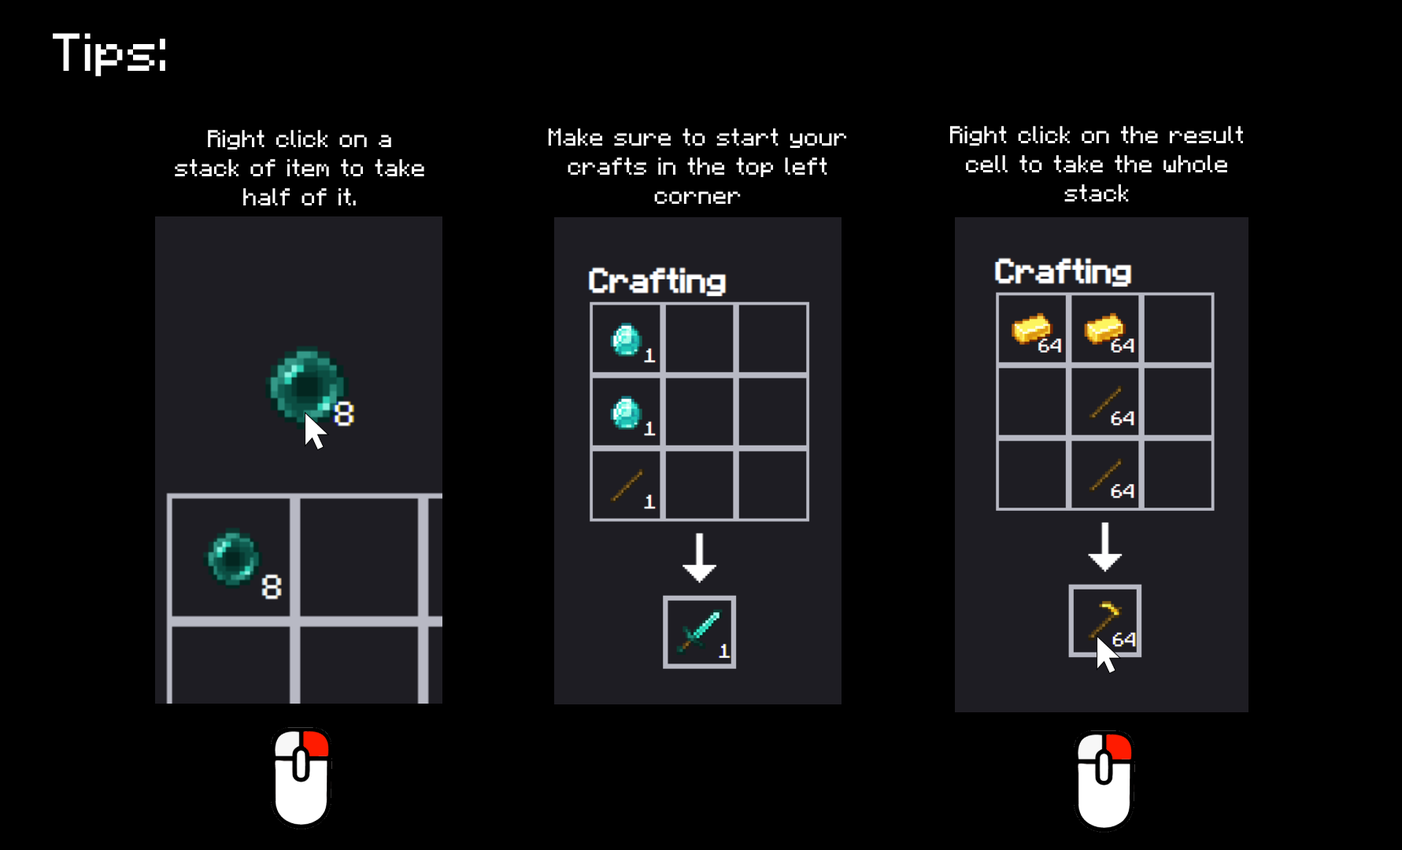
<style>
.page{position:relative;width:1402px;height:850px;background:#000000}
.page>*{position:absolute;margin:0}
.t1{font:53.5px "Minecraft-Regular";color:#ffffff}
.t2{font:24.4px "Minecraft-Regular";color:#ffffff}
</style>
<div class="page">
<p class="t1" style="left:53px;top:33px;width:112px;height:43px">Tips:</p>
<p class="t2" style="left:950px;top:126px;width:293px;height:76px;text-align:center">Right click on the result cell to take the whole stack</p>
<p class="t2" style="left:175px;top:130px;width:249px;height:76px;text-align:center">Right click on a stack of item to take half of it.</p>
<p class="t2" style="left:548px;top:128px;width:299px;height:76px;text-align:center">Make sure to start your crafts in the top left corner</p>
</div>
